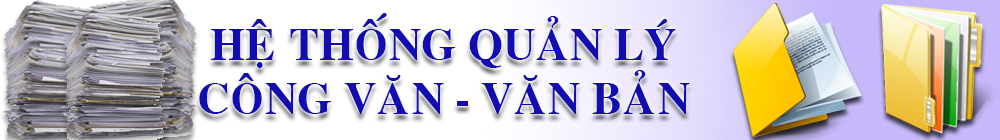
<style>
.page{position:relative;width:1000px;height:140px}
.page>*{position:absolute;margin:0}
.t1{font:45px "VNI-Times-Bold";color:#130cb0}
</style>
<div class="page">
<p class="t1" style="left:199px;top:13px;width:491px;height:101px;text-align:center">HEÄ THOÁNG QUAÛN LYÙ<br>COÂNG VAÊN - VAÊN BAÛN</p>
</div>
